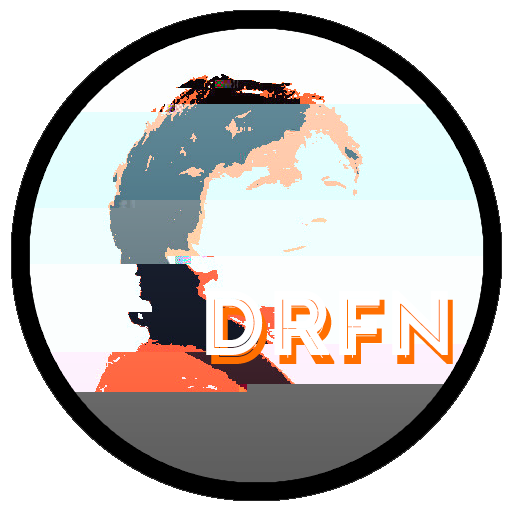
<style>
.page{position:relative;width:512px;height:512px;background:#ffffff}
.page>*{position:absolute;margin:0}
.t1{font:91.9px "Intro-Inline";color:#ffffff;text-transform:uppercase}
</style>
<div class="page">
<p class="t1" style="left:206px;top:290px;width:242px;height:65px">DRFN</p>
</div>
